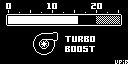
<style>
.page{position:relative;width:128px;height:64px;background:#000000}
.page>*{position:absolute;margin:0}
.t1{font:16px "Gamer";color:#ffffff}
.t2{font:16px/10px "Gamer";color:#ffffff}
</style>
<div class="page">
<p class="t1" style="left:6px;top:3px;width:5px;height:6px">0</p>
<p class="t1" style="left:47px;top:3px;width:10px;height:6px">10</p>
<p class="t1" style="left:91px;top:3px;width:11px;height:6px">20</p>
<p class="t2" style="left:65px;top:36px;width:30px;height:16px">TURBO<br>BOOST</p>
</div>
